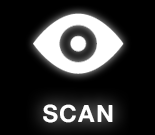
<style>
.page{position:relative;width:155px;height:135px;background:#000000}
.page>*{position:absolute;margin:0}
.t1{font:24px "AlteHaasGrotesk_Bold";letter-spacing:0.05em;color:#ffffff}
</style>
<div class="page">
<p class="t1" style="left:43px;top:104px;width:70px;height:19px">SCAN</p>
</div>
